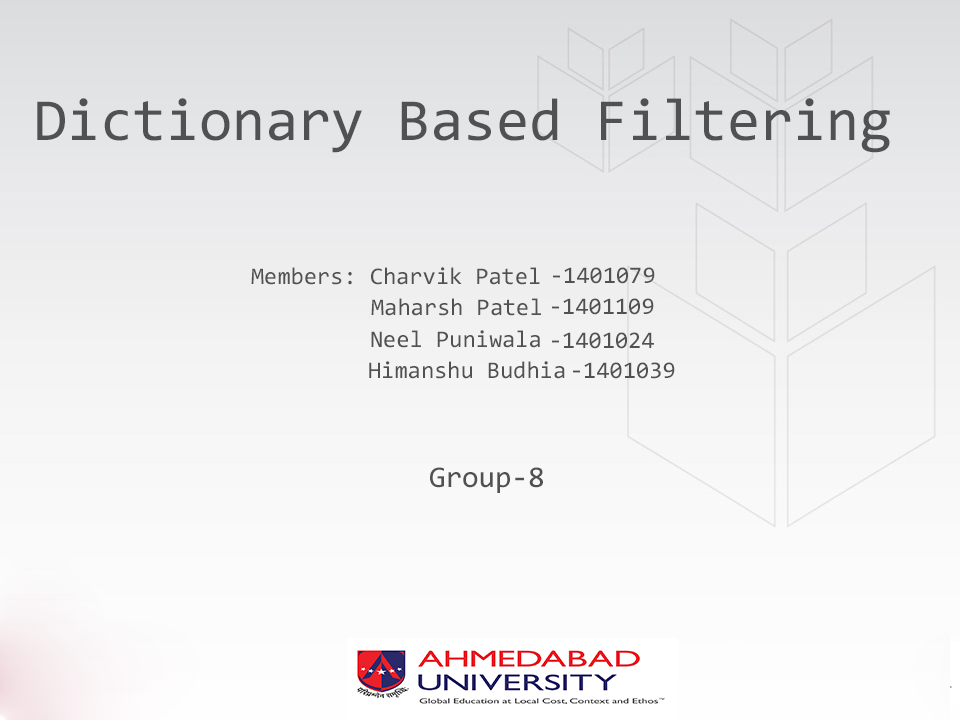
<style>
.page{position:relative;width:960px;height:720px}
.page>*{position:absolute;margin:0}
.t1{font:60px "Consolas";color:#515151}
.t2{font:24px "Consolas";color:#515151}
.t3{font:30px "Consolas";color:#515151}
</style>
<div class="page">
<p class="t1" style="left:37px;top:98px;width:853px;height:55px">Dictionary Based Filtering</p>
<p class="t2" style="left:251px;top:267px;width:289px;height:18px">Members: Charvik Patel</p>
<p class="t2" style="left:553px;top:267px;width:102px;height:17px">-1401079</p>
<p class="t2" style="left:371px;top:298px;width:170px;height:18px">Maharsh Patel</p>
<p class="t2" style="left:552px;top:298px;width:102px;height:17px">-1401109</p>
<p class="t2" style="left:371px;top:330px;width:169px;height:18px">Neel Puniwala</p>
<p class="t2" style="left:552px;top:332px;width:102px;height:17px">-1401024</p>
<p class="t2" style="left:369px;top:361px;width:196px;height:18px">Himanshu Budhia</p>
<p class="t2" style="left:573px;top:362px;width:102px;height:17px">-1401039</p>
<p class="t3" style="left:430px;top:467px;width:113px;height:26px">Group-8</p>
</div>
